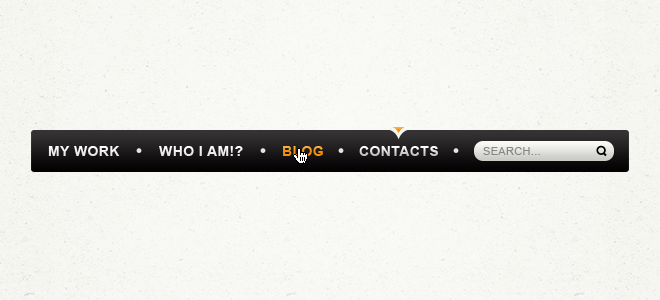
<style>
.page{position:relative;width:660px;height:300px}
.page>*{position:absolute;margin:0}
.t1{font:14px "Arial-BoldMT";letter-spacing:0.03em;color:#f4f4f4;text-transform:uppercase}
.t2{font:14px "Arial-BoldMT";letter-spacing:0.03em;text-transform:uppercase}
.t3{font:11px "ArialMT";letter-spacing:0.03em;color:#868686;text-transform:uppercase}
</style>
<div class="page">
<p class="t1" style="left:48px;top:146px;width:72px;height:10px">MY WORK</p>
<p class="t1" style="left:159px;top:146px;width:84px;height:10px">WHO I AM!?</p>
<p class="t2" style="left:283px;top:146px;width:40px;height:10px">BLOG</p>
<p class="t2" style="left:359px;top:146px;width:79px;height:10px">CONTACTS</p>
<p class="t3" style="left:483px;top:147px;width:57px;height:8px">Search...</p>
</div>
